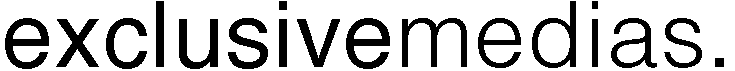
<style>
.page{position:relative;width:735px;height:71px;background:#ffffff}
.page>*{position:absolute;margin:0}
.t1{font:91.7px "Helvetica";letter-spacing:0.02em;color:#000000}
.t2{font:91.7px "Helvetica-Light";letter-spacing:0.02em;color:#000000}
</style>
<div class="page">
<p class="t1" style="left:5px;top:1px;width:719px;height:68px">exclusive<span class="t2">medias</span>.</p>
</div>
